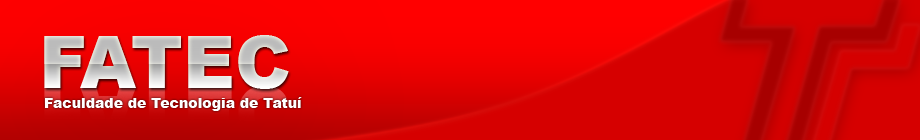
<style>
.page{position:relative;width:920px;height:140px}
.page>*{position:absolute;margin:0}
.t1{font:14px "Arial-Black";color:#ffffff}
</style>
<div class="page">
<p class="t1" style="left:45px;top:97px;width:257px;height:14px">Faculdade de Tecnologia de Tatuí</p>
</div>
